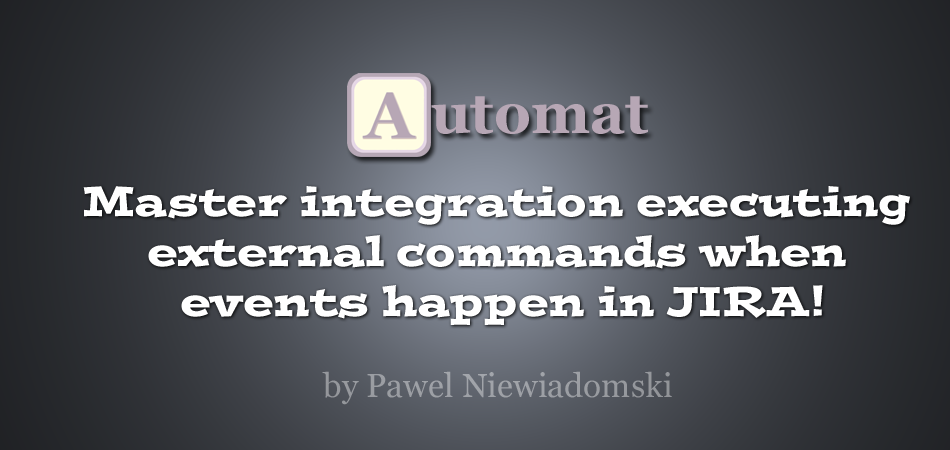
<style>
.page{position:relative;width:950px;height:450px}
.page>*{position:absolute;margin:0}
.t1{font:58.3px "Georgia-Bold";color:#b7a7b5}
.t2{font:41.7px "PostinoStd";color:#ffffff}
.t3{font:33.3px "Georgia";color:#9b9ea3}
</style>
<div class="page">
<p class="t1" style="left:431px;top:96px;width:217px;height:38px">utomat</p>
<p class="t2" style="left:83px;top:186px;width:827px;height:139px;text-align:center">Master integration executing <br>external commands when <br>events happen in JIRA!</p>
<p class="t3" style="left:322px;top:371px;width:350px;height:34px">by Pawel Niewiadomski</p>
</div>
